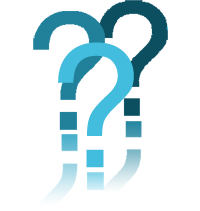
<style>
.page{position:relative;width:200px;height:211px;background:#ffffff}
.page>*{position:absolute;margin:0}
.t1{font:171.4px "Helvetica";color:#43bddd}
</style>
<div class="page">
<p class="t1" style="left:58px;top:42px;width:76px;height:126px">?</p>
</div>
